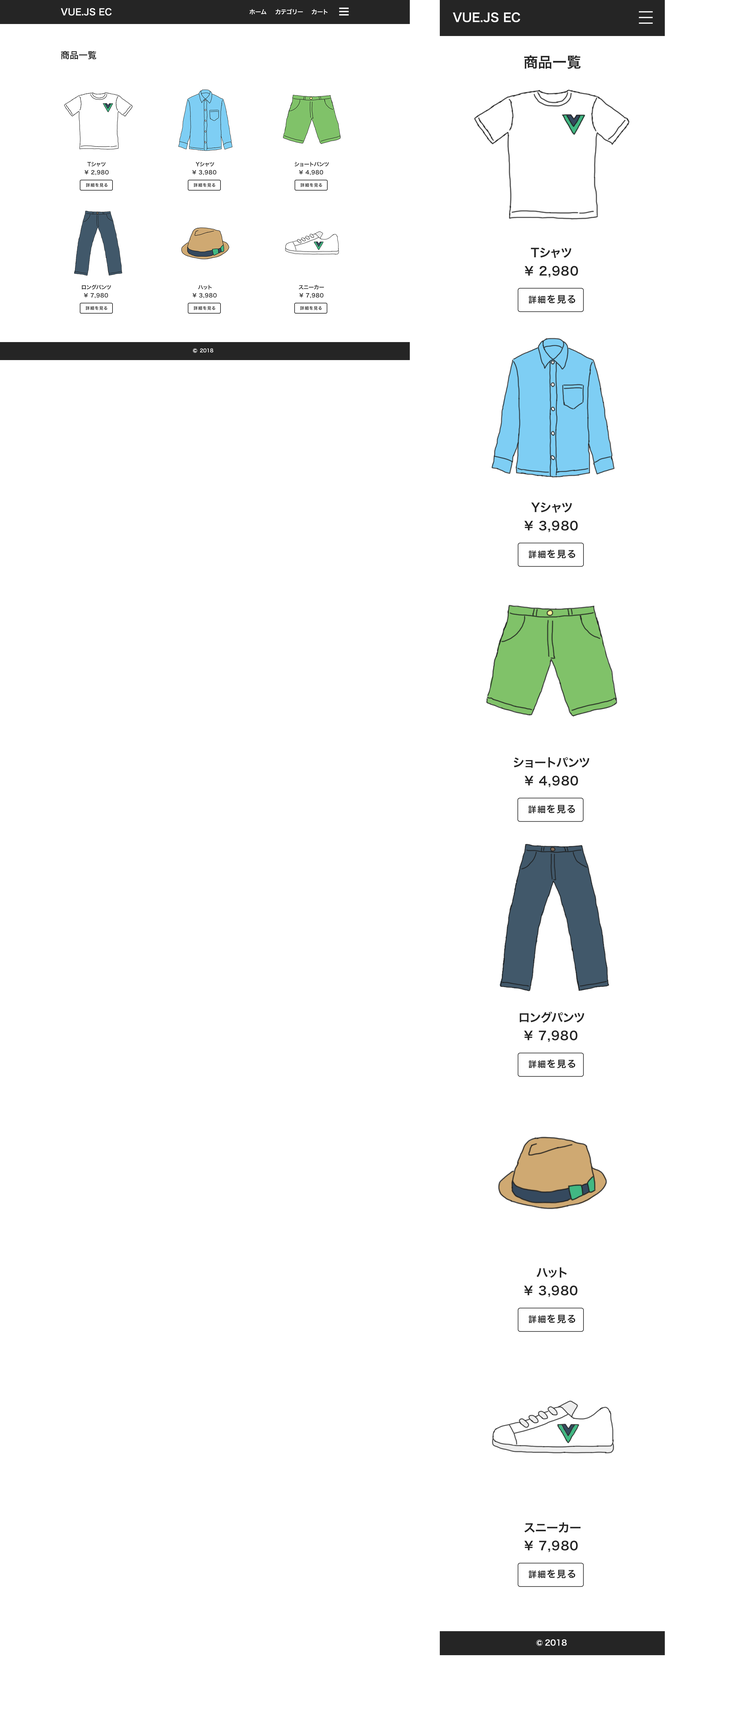
<style>
.page{position:relative;width:741px;height:1726px;background:#ffffff}
.page>*{position:absolute;margin:0}
.t1{font:9px "HiraKakuPro-W6";color:#ffffff}
.t2{font:6px "HiraKakuPro-W6";color:#ffffff}
.t3{font:12px "HiraKakuPro-W6";color:#ffffff}
.t4{font:9px "HiraKakuPro-W6";color:#252525}
.t5{font:14.4px "HiraKakuPro-W6";color:#252525}
.t6{font:5.4px "HiraKakuPro-W6";color:#252525}
.t7{font:5.4px "HiraKakuPro-W6";letter-spacing:0.05em;color:#252525}
.t8{font:4.2px "HiraKakuPro-W6";letter-spacing:0.1em;color:#252525}
.t9{font:12px "HiraKakuPro-W6";color:#252525}
.t10{font:12px "HiraKakuPro-W6";letter-spacing:0.05em;color:#252525}
.t11{font:9.5px "HiraKakuPro-W6";letter-spacing:0.1em;color:#252525}
.t12{font:8.4px "HiraKakuPro-W6";letter-spacing:0.1em;color:#252525}
.t13{font:4.8px "HiraKakuPro-W6";color:#ffffff}
.t14{font:12.6px "HiraKakuPro-W6";color:#ffffff}
.t15{font:7.8px "HiraKakuPro-W6";color:#ffffff}
</style>
<div class="page">
<p class="t1" style="left:61px;top:8px;width:51px;height:8px">VUE.JS EC</p>
<p class="t2" style="left:249px;top:9px;width:17px;height:6px">ホーム</p>
<p class="t2" style="left:275px;top:9px;width:28px;height:5px">カテゴリー</p>
<p class="t2" style="left:312px;top:9px;width:16px;height:5px">カート</p>
<p class="t3" style="left:453px;top:12px;width:67px;height:10px">VUE.JS EC</p>
<p class="t4" style="left:61px;top:51px;width:35px;height:8px">商品一覧</p>
<p class="t5" style="left:524px;top:55px;width:57px;height:14px">商品一覧</p>
<p class="t6" style="left:87px;top:162px;width:19px;height:5px">Tシャツ</p>
<p class="t6" style="left:196px;top:162px;width:18px;height:5px">Yシャツ</p>
<p class="t6" style="left:295px;top:162px;width:34px;height:4px">ショートパンツ</p>
<p class="t7" style="left:84px;top:170px;width:25px;height:5px">¥ 2,980</p>
<p class="t7" style="left:192px;top:170px;width:24px;height:5px">¥ 3,980</p>
<p class="t7" style="left:299px;top:170px;width:24px;height:5px">¥ 4,980</p>
<p class="t8" style="left:86px;top:183px;width:22px;height:4px">詳細を見る</p>
<p class="t8" style="left:194px;top:183px;width:21px;height:4px">詳細を見る</p>
<p class="t8" style="left:300px;top:183px;width:22px;height:4px">詳細を見る</p>
<p class="t9" style="left:531px;top:248px;width:41px;height:10px">Tシャツ</p>
<p class="t10" style="left:524px;top:266px;width:54px;height:12px">¥ 2,980</p>
<p class="t6" style="left:82px;top:284px;width:29px;height:6px">ロングパンツ</p>
<p class="t7" style="left:84px;top:293px;width:24px;height:5px">¥ 7,980</p>
<p class="t7" style="left:192px;top:293px;width:25px;height:5px">¥ 3,980</p>
<p class="t6" style="left:198px;top:285px;width:14px;height:5px">ハット</p>
<p class="t6" style="left:298px;top:285px;width:26px;height:5px">スニーカー</p>
<p class="t7" style="left:299px;top:293px;width:24px;height:5px">¥ 7,980</p>
<p class="t11" style="left:529px;top:295px;width:46px;height:9px"><span class="t12">詳細</span>を見る</p>
<p class="t8" style="left:86px;top:306px;width:21px;height:4px">詳細を見る</p>
<p class="t8" style="left:194px;top:306px;width:21px;height:4px">詳細を見る</p>
<p class="t8" style="left:300px;top:306px;width:22px;height:4px">詳細を見る</p>
<p class="t1" style="left:193px;top:348px;width:4px;height:5px">©️</p>
<p class="t13" style="left:200px;top:348px;width:13px;height:4px">2018</p>
<p class="t9" style="left:531px;top:502px;width:41px;height:11px">Yシャツ</p>
<p class="t10" style="left:524px;top:520px;width:54px;height:12px">¥ 3,980</p>
<p class="t11" style="left:529px;top:549px;width:46px;height:9px"><span class="t12">詳細</span>を見る</p>
<p class="t9" style="left:514px;top:757px;width:76px;height:11px">ショートパンツ</p>
<p class="t10" style="left:524px;top:776px;width:54px;height:11px">¥ 4,980</p>
<p class="t11" style="left:528px;top:804px;width:47px;height:9px"><span class="t12">詳細</span>を見る</p>
<p class="t9" style="left:520px;top:1011px;width:64px;height:12px">ロングパンツ</p>
<p class="t10" style="left:524px;top:1030px;width:54px;height:12px">¥ 7,980</p>
<p class="t11" style="left:529px;top:1059px;width:46px;height:9px"><span class="t12">詳細</span>を見る</p>
<p class="t9" style="left:536px;top:1267px;width:31px;height:11px">ハット</p>
<p class="t10" style="left:524px;top:1285px;width:54px;height:12px">¥ 3,980</p>
<p class="t11" style="left:529px;top:1314px;width:46px;height:9px"><span class="t12">詳細</span>を見る</p>
<p class="t9" style="left:524px;top:1522px;width:56px;height:10px">スニーカー</p>
<p class="t10" style="left:524px;top:1540px;width:54px;height:12px">¥ 7,980</p>
<p class="t11" style="left:529px;top:1569px;width:46px;height:9px"><span class="t12">詳細</span>を見る</p>
<p class="t14" style="left:536px;top:1639px;width:7px;height:7px">©️</p>
<p class="t15" style="left:545px;top:1639px;width:22px;height:7px">2018</p>
</div>
